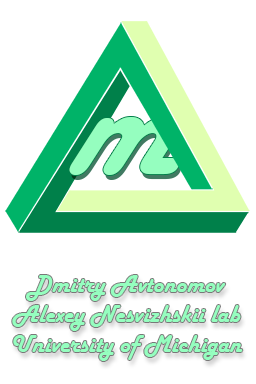
<style>
.page{position:relative;width:256px;height:384px;background:#ffffff}
.page>*{position:absolute;margin:0}
.t1{font:155px "HarlowSolid";color:#95febf}
.t2{font:25px "HarlowSolid";color:#95febf}
</style>
<div class="page">
<p class="t1" style="left:69px;top:117px;width:111px;height:58px">m</p>
<p class="t2" style="left:12px;top:275px;width:231px;height:86px;text-align:center">Dmitry Avtonomov<br>Alexey Nesvizhskii lab<br>University of Michigan</p>
</div>
